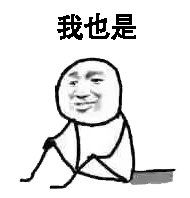
<style>
.page{position:relative;width:190px;height:198px;background:#ffffff}
.page>*{position:absolute;margin:0}
.t1{font:28px "AdobeHeitiStd-Regular";letter-spacing:-0.08em;color:#000000;font-weight:bold}
</style>
<div class="page">
<p class="t1" style="left:57px;top:13px;width:79px;height:27px">我也是</p>
</div>
